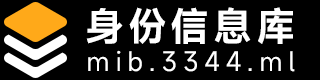
<style>
.page{position:relative;width:320px;height:80px;background:#000000}
.page>*{position:absolute;margin:0}
.t1{font:39px "MiSans-Semibold";letter-spacing:0.1em;color:#ffffff;text-transform:uppercase}
.t2{font:26px "MiSans-Regular";letter-spacing:0.23em;color:#ffffff}
</style>
<div class="page">
<p class="t1" style="left:86px;top:7px;width:207px;height:37px">身份信息库</p>
<p class="t2" style="left:88px;top:50px;width:207px;height:22px">mib.3344.ml</p>
</div>
